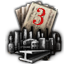
<style>
.page{position:relative;width:70px;height:64px;background:#ffffff}
.page>*{position:absolute;margin:0}
.t1{font:24px "BodoniSvtyTwoITCTT-Book";color:#c81414}
</style>
<div class="page">
<p class="t1" style="left:32px;top:8px;width:14px;height:17px;rotate:19deg">3</p>
</div>
